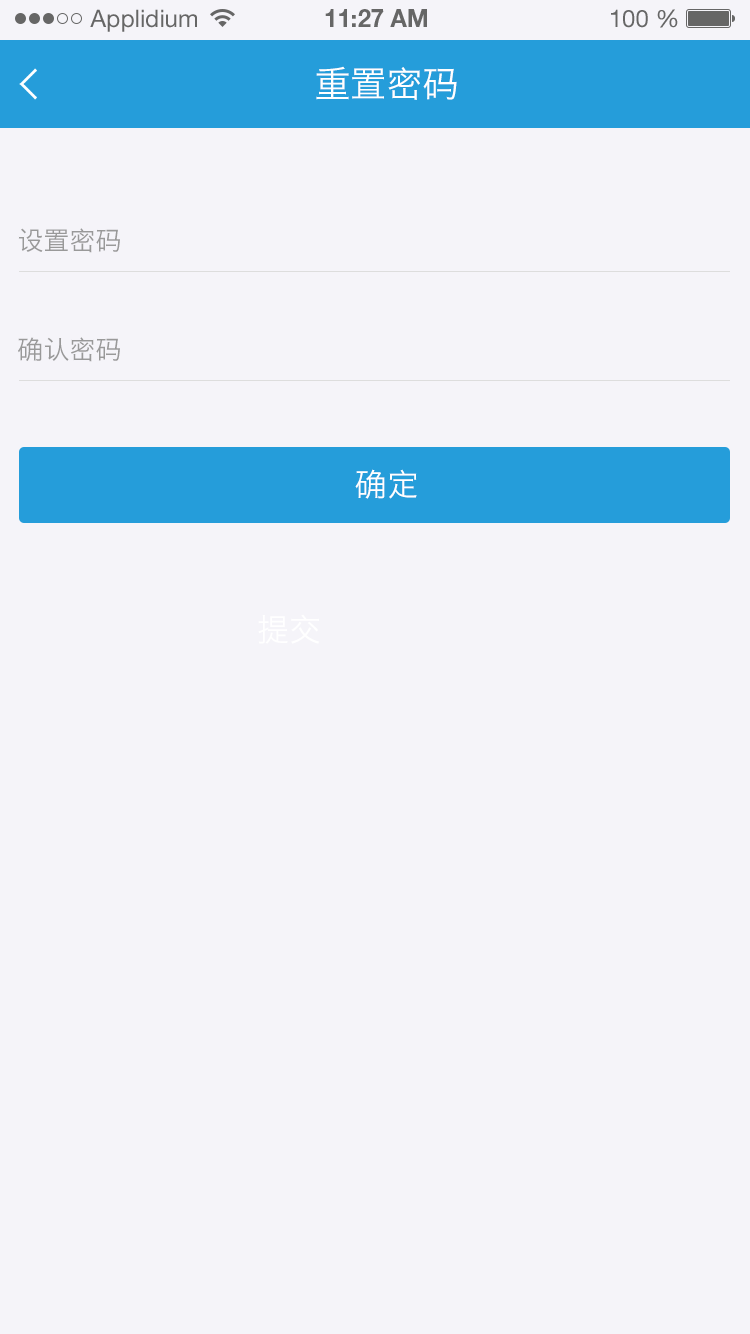
<style>
.page{position:relative;width:750px;height:1334px;background:#f5f4f9}
.page>*{position:absolute;margin:0}
.t1{font:24px "HelveticaNeueLTStd-Roman";color:#666666}
.t2{font:24px "HelveticaNeueLTStd-Bd";color:#666666}
.t3{font:36px "HiraginoSansGB-W3";color:#ffffff;text-transform:uppercase}
.t4{font:26px "HiraginoSansGB-W3";color:#999999;text-transform:uppercase}
.t5{font:32px "HiraginoSansGB-W3";color:#ffffff;text-transform:uppercase}
</style>
<div class="page">
<p class="t1" style="left:90px;top:9px;width:107px;height:23px">Applidium</p>
<p class="t2" style="left:325px;top:9px;width:102px;height:18px">11:27 AM</p>
<p class="t1" style="left:611px;top:9px;width:67px;height:19px">100 %</p>
<p class="t3" style="left:316px;top:66px;width:141px;height:34px">重置密码</p>
<p class="t4" style="left:18px;top:228px;width:102px;height:25px">设置密码</p>
<p class="t4" style="left:18px;top:337px;width:102px;height:25px">确认密码</p>
<p class="t5" style="left:355px;top:469px;width:62px;height:30px">确定</p>
<p class="t5" style="left:258px;top:614px;width:62px;height:30px">提交</p>
</div>
